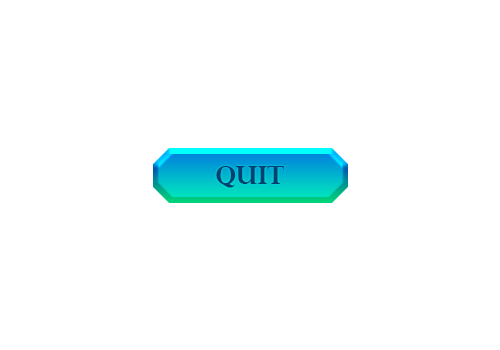
<style>
.page{position:relative;width:500px;height:350px;background:#ffffff}
.page>*{position:absolute;margin:0}
.t1{font:25.4px "PerpetuaTitlingMT-Bold";color:#064070}
</style>
<div class="page">
<p class="t1" style="left:216px;top:166px;width:68px;height:22px">QUIT</p>
</div>
